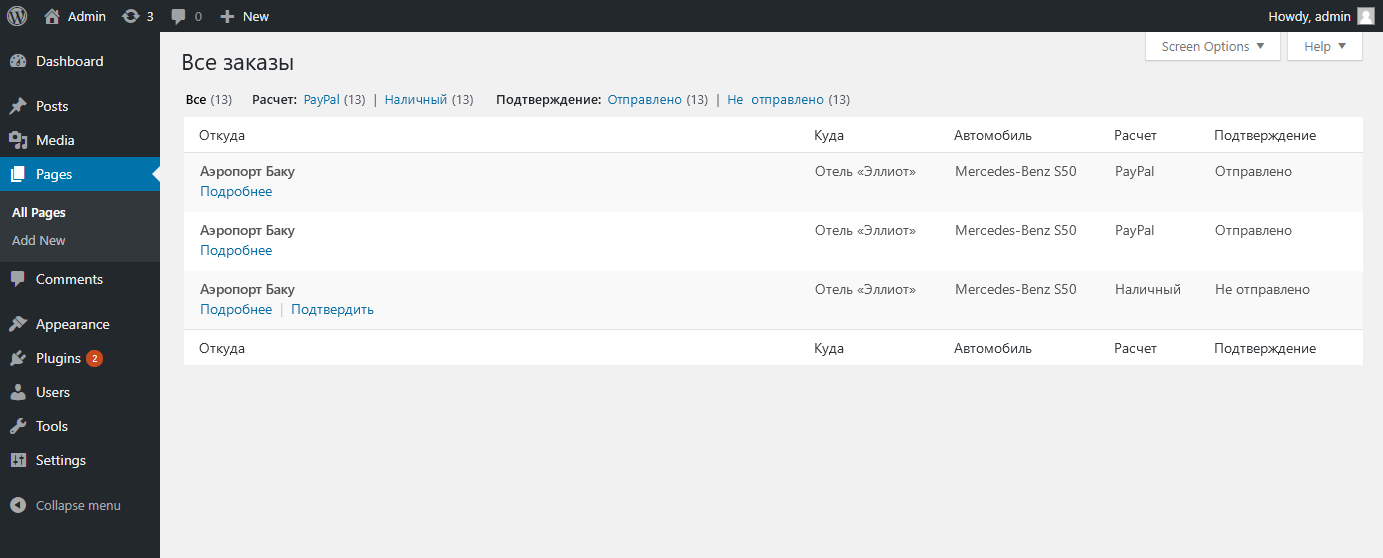
<style>
.page{position:relative;width:1383px;height:558px;background:#f1f1f1}
.page>*{position:absolute;margin:0}
.t1{font:23px "SegoeUI";color:#23282d}
.t2{font:13px "SegoeUI";color:#555d66}
.t3{font:13px "SegoeUI-Semibold";color:#000000}
.t4{font:13px "SegoeUI-Semibold";color:#23282d}
.t5{font:13px "SegoeUI";color:#0073aa}
.t6{font:13px "SegoeUI";color:#666666}
.t7{font:14px "SegoeUI";color:#32373c}
.t8{font:14px "SegoeUI-Semibold";color:#555555}
.t9{font:14px "SegoeUI";color:#555555}
.t10{font:14px "SegoeUI";color:#0073aa}
.t11{font:14px "SegoeUI";color:#cccccc}
</style>
<div class="page">
<p class="t1" style="left:183px;top:54px;width:110px;height:16px">Все заказы</p>
<p class="t2" style="left:186px;top:95px;width:46px;height:11px"><span class="t3">Все </span>(13)</p>
<p class="t4" style="left:253px;top:95px;width:44px;height:9px">Расчет:</p>
<p class="t5" style="left:304px;top:94px;width:169px;height:13px">PayPal <span class="t2">(13)</span><span class="t6">  |  </span>Наличный <span class="t2">(13)</span></p>
<p class="t4" style="left:497px;top:95px;width:104px;height:12px">Подтверждение:</p>
<p class="t5" style="left:608px;top:94px;width:242px;height:13px">Отправлено <span class="t2">(13)</span><span class="t6">  |  </span>Не  отправлено <span class="t2">(13)</span></p>
<p class="t7" style="left:199px;top:130px;width:46px;height:13px">Откуда</p>
<p class="t7" style="left:815px;top:130px;width:29px;height:13px">Куда</p>
<p class="t7" style="left:954px;top:130px;width:78px;height:10px">Автомобиль</p>
<p class="t7" style="left:1115px;top:130px;width:42px;height:10px">Расчет</p>
<p class="t7" style="left:1215px;top:130px;width:101px;height:13px">Подтверждение</p>
<p class="t8" style="left:200px;top:166px;width:95px;height:13px">Аэропорт Баку</p>
<p class="t9" style="left:815px;top:166px;width:101px;height:10px">Отель «Эллиот»</p>
<p class="t9" style="left:956px;top:166px;width:120px;height:10px">Mercedes-Benz S50</p>
<p class="t9" style="left:1116px;top:166px;width:38px;height:13px">PayPal</p>
<p class="t9" style="left:1215px;top:166px;width:77px;height:13px">Отправлено</p>
<p class="t10" style="left:201px;top:186px;width:71px;height:13px">Подробнее</p>
<p class="t8" style="left:200px;top:225px;width:95px;height:13px">Аэропорт Баку</p>
<p class="t9" style="left:815px;top:225px;width:101px;height:10px">Отель «Эллиот»</p>
<p class="t9" style="left:956px;top:225px;width:120px;height:10px">Mercedes-Benz S50</p>
<p class="t9" style="left:1116px;top:225px;width:38px;height:13px">PayPal</p>
<p class="t9" style="left:1215px;top:225px;width:77px;height:13px">Отправлено</p>
<p class="t10" style="left:201px;top:245px;width:71px;height:13px">Подробнее</p>
<p class="t8" style="left:200px;top:284px;width:95px;height:13px">Аэропорт Баку</p>
<p class="t9" style="left:815px;top:284px;width:101px;height:10px">Отель «Эллиот»</p>
<p class="t9" style="left:956px;top:284px;width:120px;height:10px">Mercedes-Benz S50</p>
<p class="t9" style="left:1116px;top:284px;width:64px;height:10px">Наличный</p>
<p class="t9" style="left:1216px;top:284px;width:94px;height:13px">Не отправлено</p>
<p class="t10" style="left:201px;top:303px;width:173px;height:14px">Подробнее<span class="t11">  |  </span>Подтвердить</p>
<p class="t7" style="left:199px;top:343px;width:46px;height:13px">Откуда</p>
<p class="t7" style="left:815px;top:343px;width:29px;height:13px">Куда</p>
<p class="t7" style="left:954px;top:343px;width:78px;height:10px">Автомобиль</p>
<p class="t7" style="left:1115px;top:343px;width:42px;height:10px">Расчет</p>
<p class="t7" style="left:1215px;top:343px;width:101px;height:13px">Подтверждение</p>
</div>
